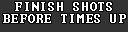
<style>
.page{position:relative;width:128px;height:32px;background:#333333}
.page>*{position:absolute;margin:0}
.t1{font:12px/11.9px "Terminal";letter-spacing:0.075em;color:#ffffff}
</style>
<div class="page">
<p class="t1" style="left:3px;top:2px;width:123px;height:21px;text-align:center">FINISH SHOTS<br>BEFORE TIMES UP</p>
</div>
